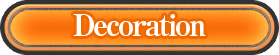
<style>
.page{position:relative;width:279px;height:55px}
.page>*{position:absolute;margin:0}
.t1{font:30px "RyuminPro-ExBold";letter-spacing:-0.08em;color:#fffff7}
</style>
<div class="page">
<p class="t1" style="left:73px;top:14px;width:133px;height:22px">Decoration</p>
</div>
